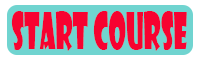
<style>
.page{position:relative;width:200px;height:60px;background:#70d4d0}
.page>*{position:absolute;margin:0}
.t1{font:11.7px "ShowcardGothic-Reg";color:#f70230;scale:0.52 1}
</style>
<div class="page">
<p class="t1" style="left:11px;top:11px;width:176px;height:40px">START COURSE</p>
</div>
